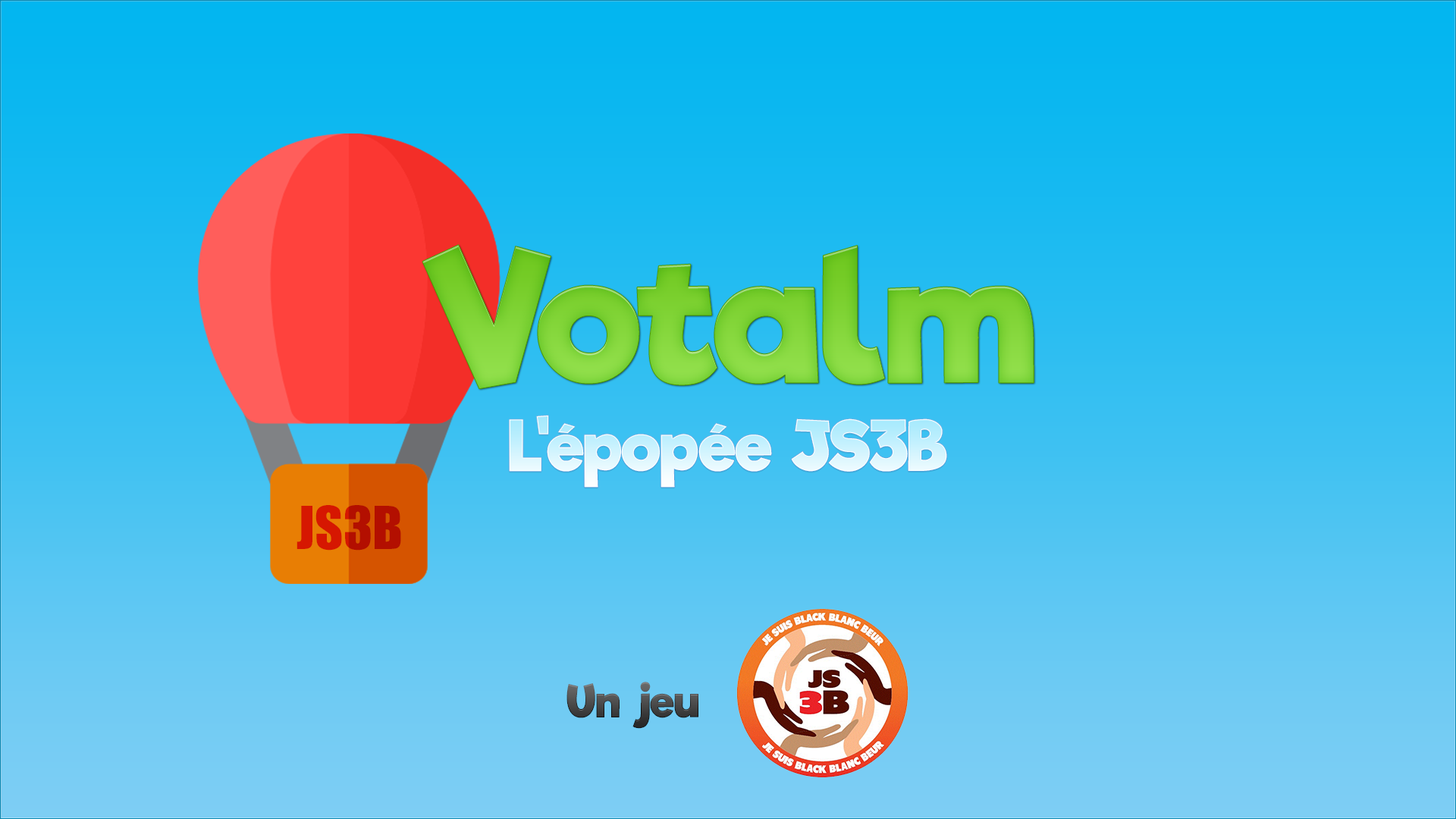
<style>
.page{position:relative;width:1456px;height:819px}
.page>*{position:absolute;margin:0}
.t1{font:179.7px "RifficFree-Bold";color:#7dd236}
.t2{font:67.5px "RifficFree-Bold"}
.t3{font:54.6px "Impact"}
.t4{font:44px "RifficFree-Bold";color:#474747}
</style>
<div class="page">
<p class="t1" style="left:422px;top:244px;width:612px;height:145px">Votalm</p>
<p class="t2" style="left:509px;top:416px;width:438px;height:72px">L'épopée JS3B</p>
<p class="t3" style="left:297px;top:505px;width:104px;height:46px">JS3B</p>
<p class="t4" style="left:566px;top:682px;width:132px;height:47px">Un jeu</p>
</div>
